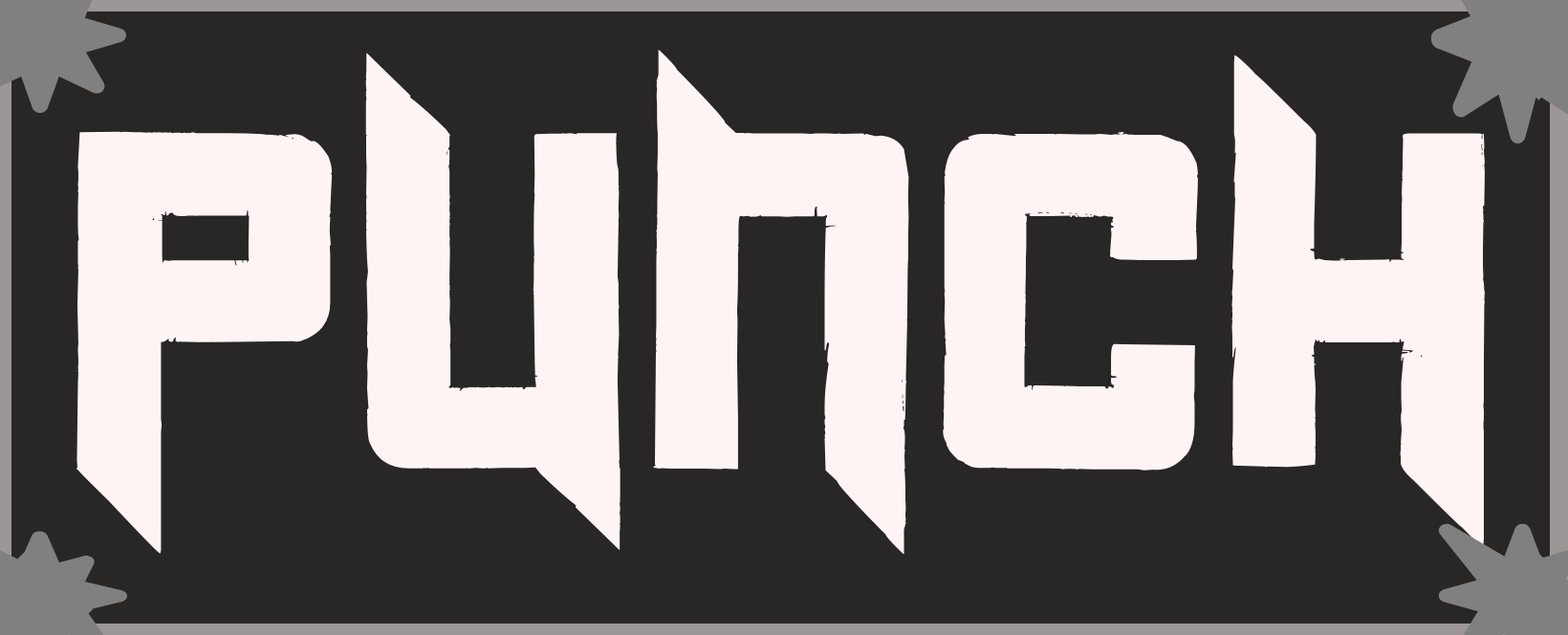
<style>
.page{position:relative;width:1568px;height:635px;background:#292626}
.page>*{position:absolute;margin:0}
.t1{font:478px "Duplexide";color:#fff4f4}
</style>
<div class="page">
<p class="t1" style="left:76px;top:50px;width:1409px;height:505px">Punch</p>
</div>
